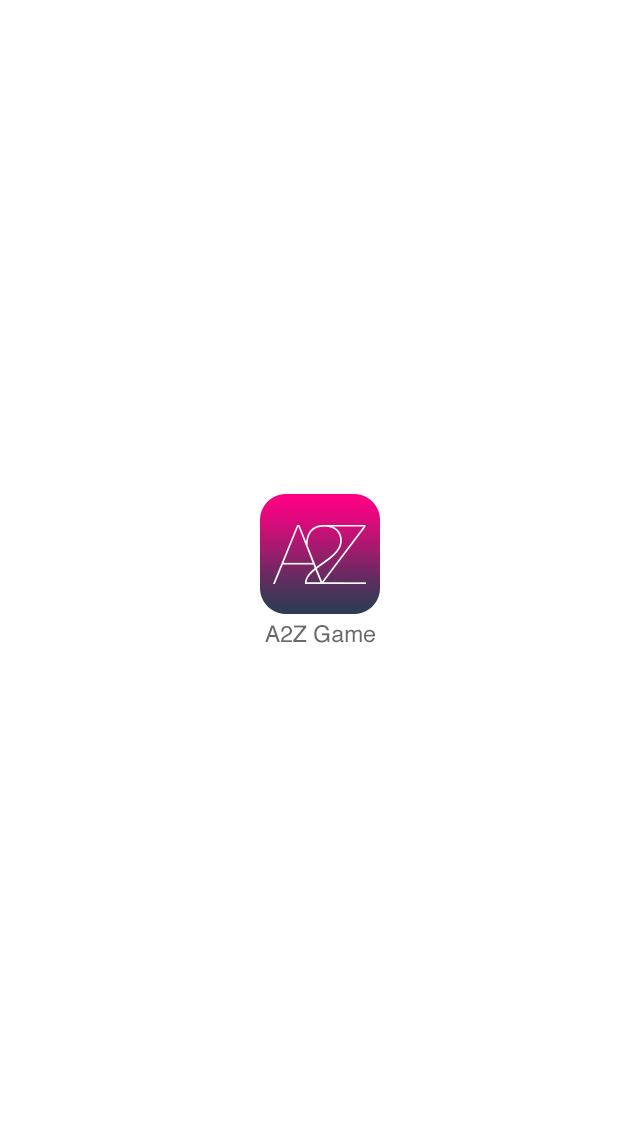
<style>
.page{position:relative;width:640px;height:1136px;background:#ffffff}
.page>*{position:absolute;margin:0}
.t1{font:23px "Helvetica";color:#6a6a6a}
</style>
<div class="page">
<p class="t1" style="left:265px;top:625px;width:110px;height:18px">A2Z Game</p>
</div>
